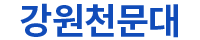
<style>
.page{position:relative;width:200px;height:40px;background:#ffffff}
.page>*{position:absolute;margin:0}
.t1{font:36px "NotoSansKR-Bold";letter-spacing:-0.025em;color:#114cb9;text-transform:uppercase}
</style>
<div class="page">
<p class="t1" style="left:20px;top:3px;width:158px;height:35px">강원천문대</p>
</div>
